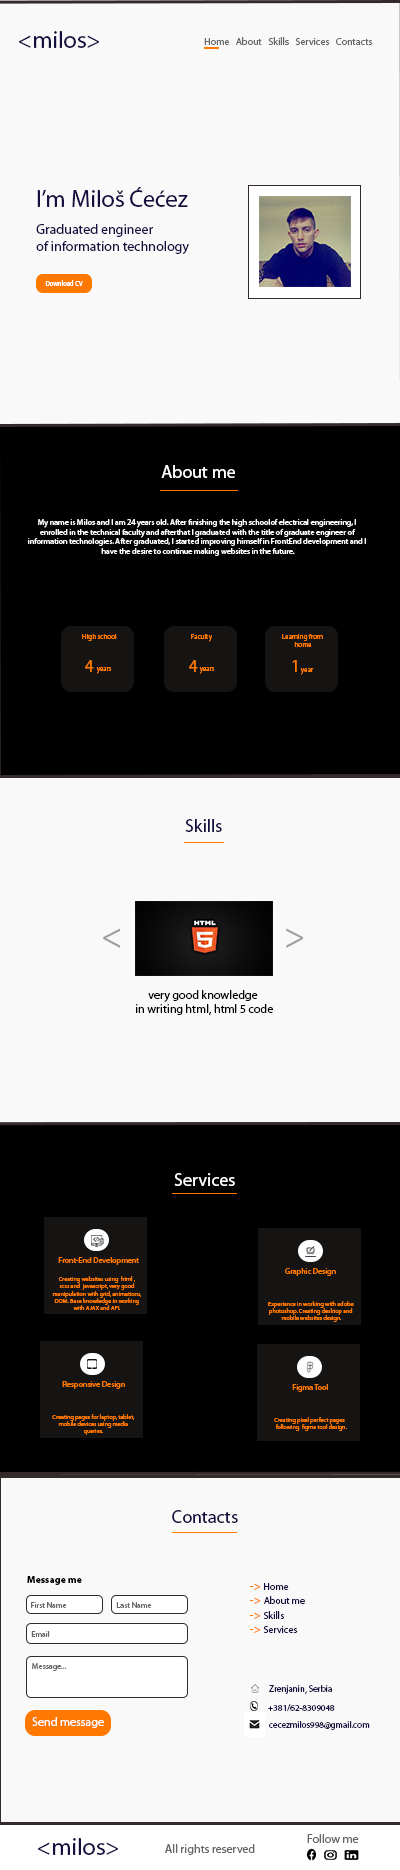
<style>
.page{position:relative;width:400px;height:1870px;background:#f9f9f9}
.page>*{position:absolute;margin:0}
.t1{font:24px "MyriadPro-Regular";color:#130f40}
.t2{font:10px "MyriadPro-Regular";color:#666666}
.t3{font:14px "MyriadPro-Regular";color:#130f40}
.t4{font:7.4px "MyriadPro-Regular";color:#ffffff;scale:0.89 1}
.t5{font:18px "MyriadPro-Regular";color:#ffffff}
.t6{font:8px "MyriadPro-Regular";color:#ffffff}
.t7{font:7px "MyriadPro-Regular";color:#ff7800}
.t8{font:18px "MyriadPro-Regular";color:#ff7800}
.t9{font:18px "MyriadPro-Regular";color:#130f40}
.t10{font:36px "MyriadPro-Regular";color:#9f9f9f}
.t11{font:12px "MyriadPro-Regular";color:#000000}
.t12{font:8px "MyriadPro-Regular";color:#ff7800}
.t13{font:6px "MyriadPro-Regular";color:#ff7800}
.t14{font:10px "MyriadPro-Bold";color:#000000}
.t15{font:10px "MyriadPro-Regular";color:#130f40}
.t16{font:12px "MyriadPro-Regular";color:#ff7800}
.t17{font:8px "MyriadPro-Regular";color:#666666}
.t18{font:9px "MyriadPro-Regular";color:#130f40}
.t19{font:12px "MyriadPro-Regular";color:#ffffff}
.t20{font:12px "MyriadPro-Regular";color:#666666}
</style>
<div class="page">
<p class="t1" style="left:19px;top:31px;width:80px;height:17px">&lt;milos&gt;</p>
<p class="t2" style="left:204px;top:37px;width:169px;height:8px">Home   About   Skills   Services   Contacts</p>
<p class="t1" style="left:37px;top:187px;width:151px;height:20px">I’m Miloš Ćećez</p>
<p class="t3" style="left:36px;top:224px;width:153px;height:30px">Graduated engineer <br>of information technology</p>
<p class="t4" style="left:45px;top:280px;width:38px;height:6px">Download CV</p>
<p class="t5" style="left:161px;top:465px;width:74px;height:13px">About me</p>
<p class="t6" style="left:28px;top:519px;width:338px;height:37px;text-align:center">My name is Milos and I am 24 years old. After finishing the high schoolof electrical engineering, I <br>enrolled in the technical faculty and afterthat I graduated with the title of graduate engineer of <br>information technologies. After graduated, I started improving himself in FrontEnd development and I <br>have the desire to continue making websites in the future.</p>
<p class="t7" style="left:82px;top:634px;width:35px;height:7px">High school</p>
<p class="t7" style="left:191px;top:634px;width:21px;height:8px">Faculty</p>
<p class="t7" style="left:282px;top:634px;width:41px;height:13px;text-align:center">Learning from <br>home</p>
<p class="t8" style="left:85px;top:660px;width:9px;height:12px">4</p>
<p class="t8" style="left:189px;top:660px;width:9px;height:12px">4</p>
<p class="t8" style="left:292px;top:660px;width:5px;height:12px">1</p>
<p class="t7" style="left:96px;top:667px;width:16px;height:7px">years</p>
<p class="t7" style="left:199px;top:667px;width:16px;height:7px">years</p>
<p class="t7" style="left:300px;top:668px;width:14px;height:7px">year</p>
<p class="t9" style="left:185px;top:819px;width:37px;height:13px">Skills</p>
<p class="t10" style="left:103px;top:928px;width:17px;height:20px">&lt;</p>
<p class="t10" style="left:286px;top:928px;width:17px;height:20px">&gt;</p>
<p class="t11" style="left:136px;top:990px;width:137px;height:25px;text-align:center">very good knowledge<br> in writing html, html 5 code</p>
<p class="t5" style="left:174px;top:1173px;width:61px;height:13px">Services</p>
<p class="t12" style="left:58px;top:1257px;width:81px;height:8px">Front-End Development</p>
<p class="t13" style="left:52px;top:1276px;width:89px;height:34px">Creating websites using  html ,<br>scss and  javascript, very good<br>manipulation with grid, animations,<br>DOM. Base knowledge in working<br>with AJAX and API.</p>
<p class="t12" style="left:285px;top:1268px;width:51px;height:8px">Graphic Design</p>
<p class="t13" style="left:268px;top:1301px;width:86px;height:21px;text-align:center">Experience in working with adobe <br>photoshop. Creating desktop and <br>mobile websites design.</p>
<p class="t12" style="left:62px;top:1381px;width:63px;height:8px">Responsive Design</p>
<p class="t12" style="left:292px;top:1384px;width:36px;height:8px"><span class="t13"><br></span>Figma Tool</p>
<p class="t13" style="left:52px;top:1414px;width:82px;height:21px">Creating pages for laptop, tablet,<br> mobile devices using media <br>queries.</p>
<p class="t13" style="left:274px;top:1417px;width:73px;height:14px">Creating pixel perfect pages<br> following  figma tool design.</p>
<p class="t9" style="left:172px;top:1510px;width:66px;height:13px">Contacts</p>
<p class="t14" style="left:27px;top:1576px;width:55px;height:9px">Message me</p>
<p class="t15" style="left:250px;top:1583px;width:55px;height:50px"><span class="t16">-&gt; </span>Home<br><span class="t16">-&gt; </span>About me<br><span class="t16">-&gt; </span>Skills<br><span class="t16">-&gt; </span>Services</p>
<p class="t17" style="left:31px;top:1602px;width:36px;height:6px">First Name</p>
<p class="t17" style="left:116px;top:1602px;width:36px;height:6px">Last Name</p>
<p class="t17" style="left:31px;top:1631px;width:19px;height:6px">Email</p>
<p class="t17" style="left:32px;top:1663px;width:34px;height:8px">Message...</p>
<p class="t18" style="left:269px;top:1685px;width:63px;height:9px">Zrenjanin, Serbia</p>
<p class="t18" style="left:268px;top:1704px;width:67px;height:7px">+381/62-8309048</p>
<p class="t19" style="left:32px;top:1717px;width:72px;height:11px">Send message</p>
<p class="t18" style="left:269px;top:1721px;width:101px;height:9px">cecezmilos998@gmail.com</p>
<p class="t1" style="left:38px;top:1838px;width:80px;height:17px">&lt;milos&gt;</p>
<p class="t20" style="left:307px;top:1834px;width:52px;height:9px">Follow me</p>
<p class="t20" style="left:165px;top:1844px;width:90px;height:11px">All rights reserved</p>
</div>
